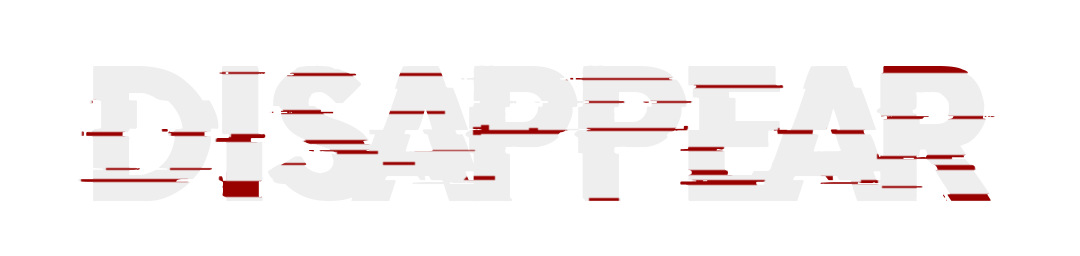
<style>
.page{position:relative;width:1080px;height:256px;background:#ffffff}
.page>*{position:absolute;margin:0}
.t1{font:150px "DoctorGlitch";color:#eeeeee}
</style>
<div class="page">
<p class="t1" style="left:78px;top:65px;width:918px;height:137px">DISAPpEAR</p>
</div>
